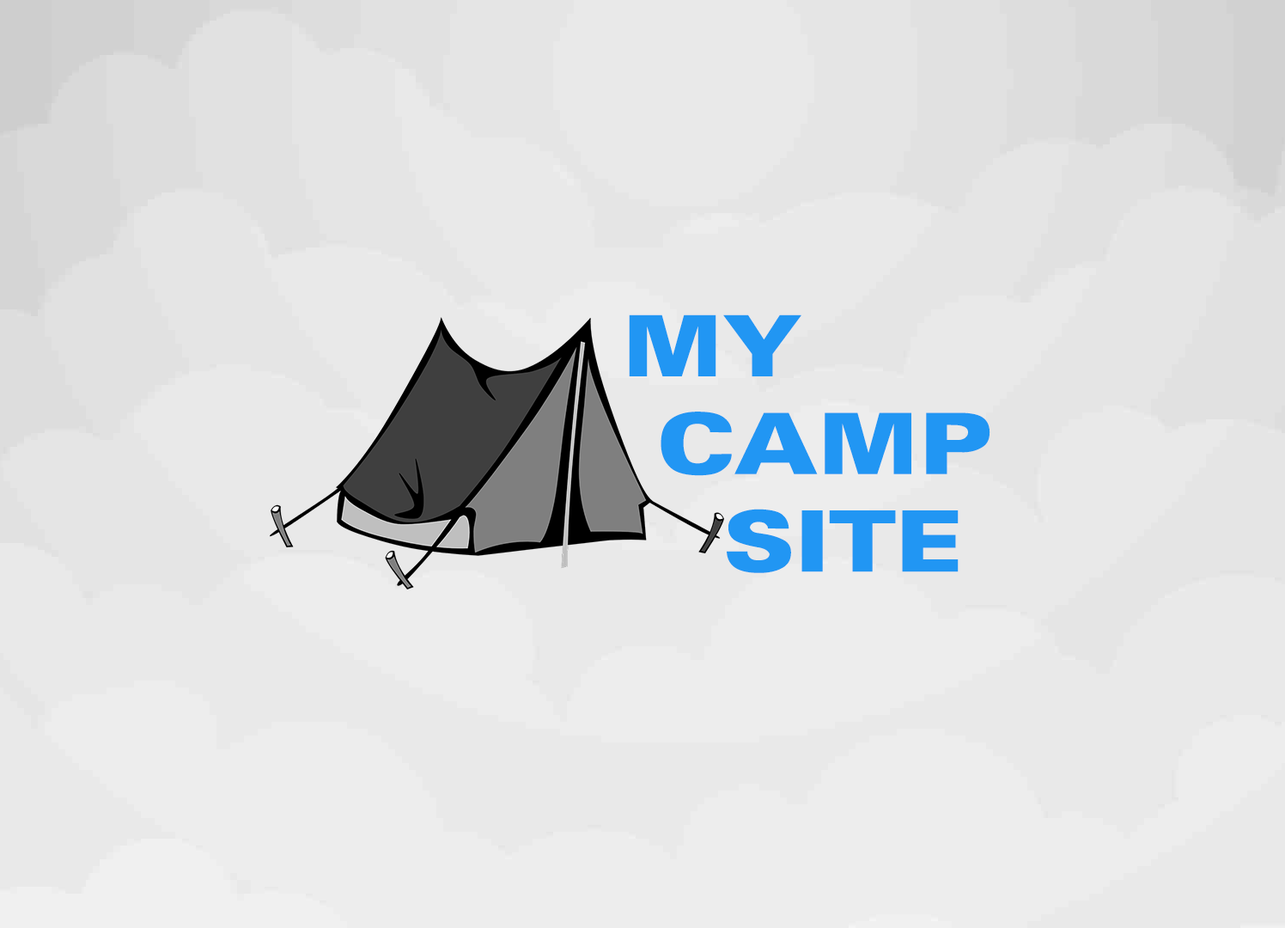
<style>
.page{position:relative;width:1285px;height:928px;background:#e9e9e9}
.page>*{position:absolute;margin:0}
.t1{font:84.2px/48.8px "Univers-Black";color:#2196f3;scale:1.19 1}
</style>
<div class="page">
<p class="t1" style="left:629px;top:314px;width:362px;height:259px">MY<br><br> CAMP<br><br>   SITE</p>
</div>
